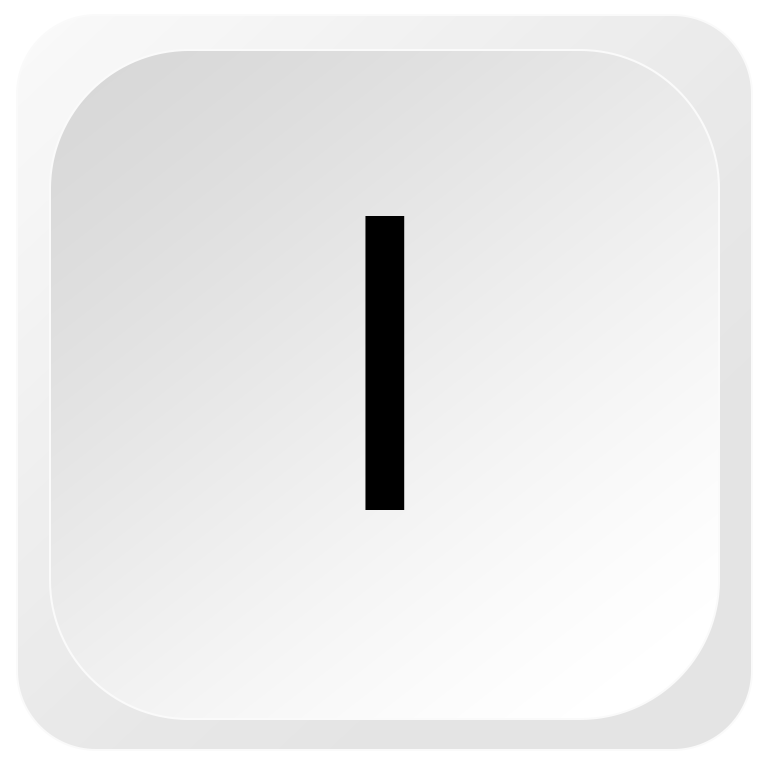
<style>
.page{position:relative;width:768px;height:768px}
.page>*{position:absolute;margin:0}
.t1{font:411px "ArialMT";color:#000000}
</style>
<div class="page">
<p class="t1" style="left:365px;top:216px;width:40px;height:294px">I</p>
</div>
